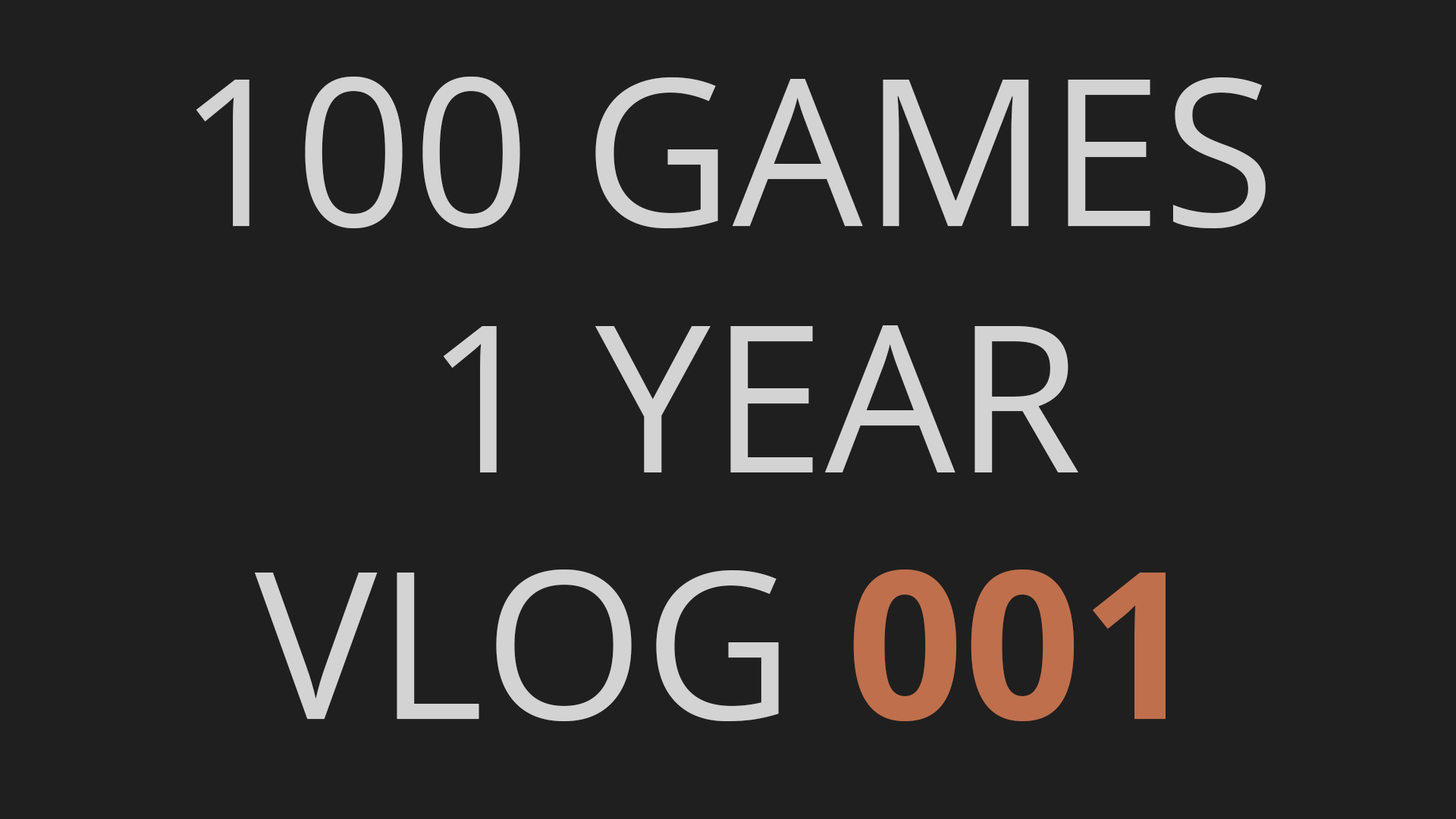
<style>
.page{position:relative;width:1456px;height:819px;background:#1f1f1f}
.page>*{position:absolute;margin:0}
.t1{font:205.4px "OpenSans-Regular";color:#d3d3d3;text-transform:uppercase}
.t2{font:205.4px "OpenSans-Bold";color:#bf6f4c;text-transform:uppercase}
</style>
<div class="page">
<p class="t1" style="left:196px;top:77px;width:1070px;height:644px;text-align:center">100 GAMES<br> 1 YEAR<br>VLog <span class="t2">001</span></p>
</div>
